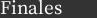
<style>
.page{position:relative;width:97px;height:18px;background:#333333}
.page>*{position:absolute;margin:0}
.t1{font:21px "OfficialFateFont-Medium";color:#ffffff}
</style>
<div class="page">
<p class="t1" style="left:0px;top:0px;width:62px;height:15px">Finales</p>
</div>
